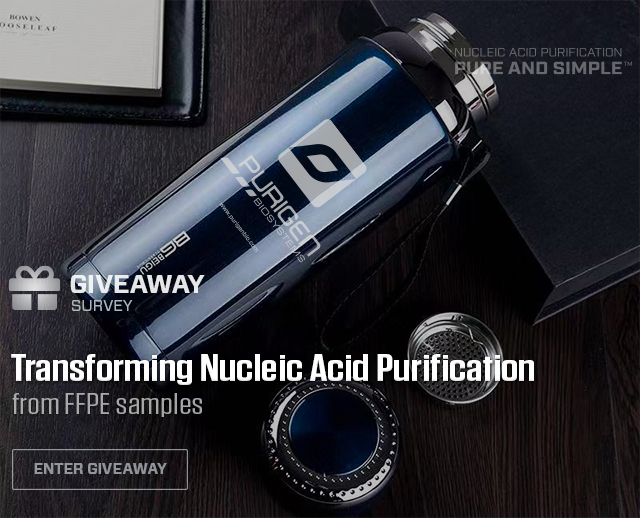
<style>
.page{position:relative;width:640px;height:518px}
.page>*{position:absolute;margin:0}
.t1{font:26px "Forza-Bold";letter-spacing:-0.013em;color:#e6e7e7;text-transform:uppercase}
.t2{font:16px "Forza-Book";letter-spacing:-0.01em;color:#b9c2c8;text-transform:uppercase}
.t3{font:38px "Tungsten-Semibold";color:#ffffff;scale:1.31 1}
.t4{font:29px "Tungsten-Book";color:#a8a7a8;scale:1.35 1}
.t5{font:15px "Forza-Bold";letter-spacing:-0.01em;color:#7c868c;text-transform:uppercase}
</style>
<div class="page">
<p class="t1" style="left:70px;top:275px;width:135px;height:18px">Giveaway</p>
<p class="t2" style="left:72px;top:300px;width:61px;height:11px;opacity:0.9">Survey</p>
<p class="t3" style="left:11px;top:354px;width:523px;height:31px">Transforming Nucleic Acid Purification</p>
<p class="t4" style="left:12px;top:393px;width:190px;height:24px">from FFPE samples</p>
<p class="t5" style="left:34px;top:463px;width:133px;height:11px">Enter Giveaway</p>
</div>
